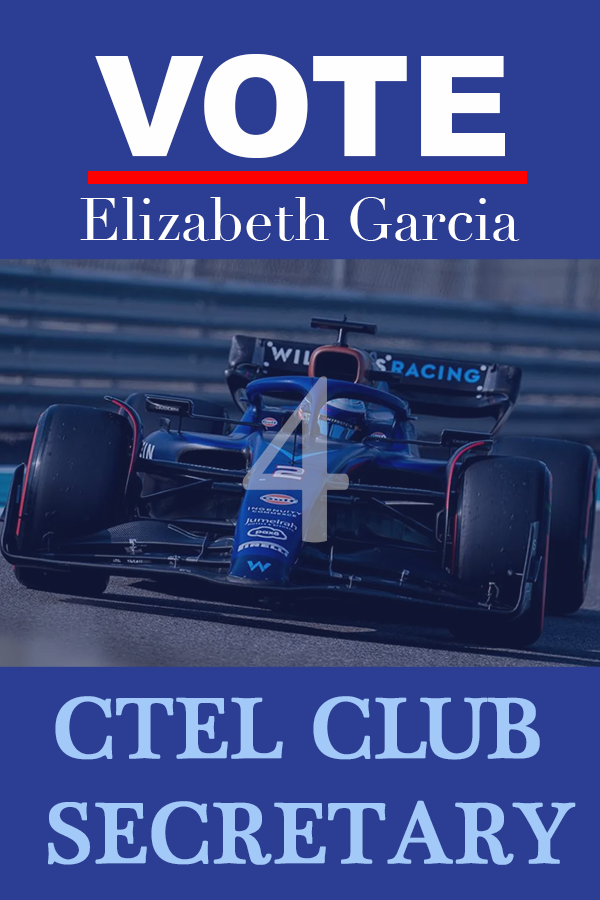
<style>
.page{position:relative;width:600px;height:900px;background:#2c3e94}
.page>*{position:absolute;margin:0}
.t1{font:138.7px "Arial-Black";color:#fffefe}
.t2{font:59.1px "Didot";color:#fffefe}
.t3{font:246.8px "PlantagenetCherokee";font-weight:bold}
.t4{font:87.7px "PlantagenetCherokee";color:#a2c9f8;font-weight:bold}
</style>
<div class="page">
<p class="t1" style="left:95px;top:54px;width:410px;height:104px">VOTE</p>
<p class="t2" style="left:80px;top:197px;width:440px;height:44px">Elizabeth Garcia</p>
<p class="t3" style="left:242px;top:376px;width:107px;height:167px">4</p>
<p class="t4" style="left:48px;top:696px;width:528px;height:169px;text-align:center">CTEL CLUB<br> SECRETARY</p>
</div>
